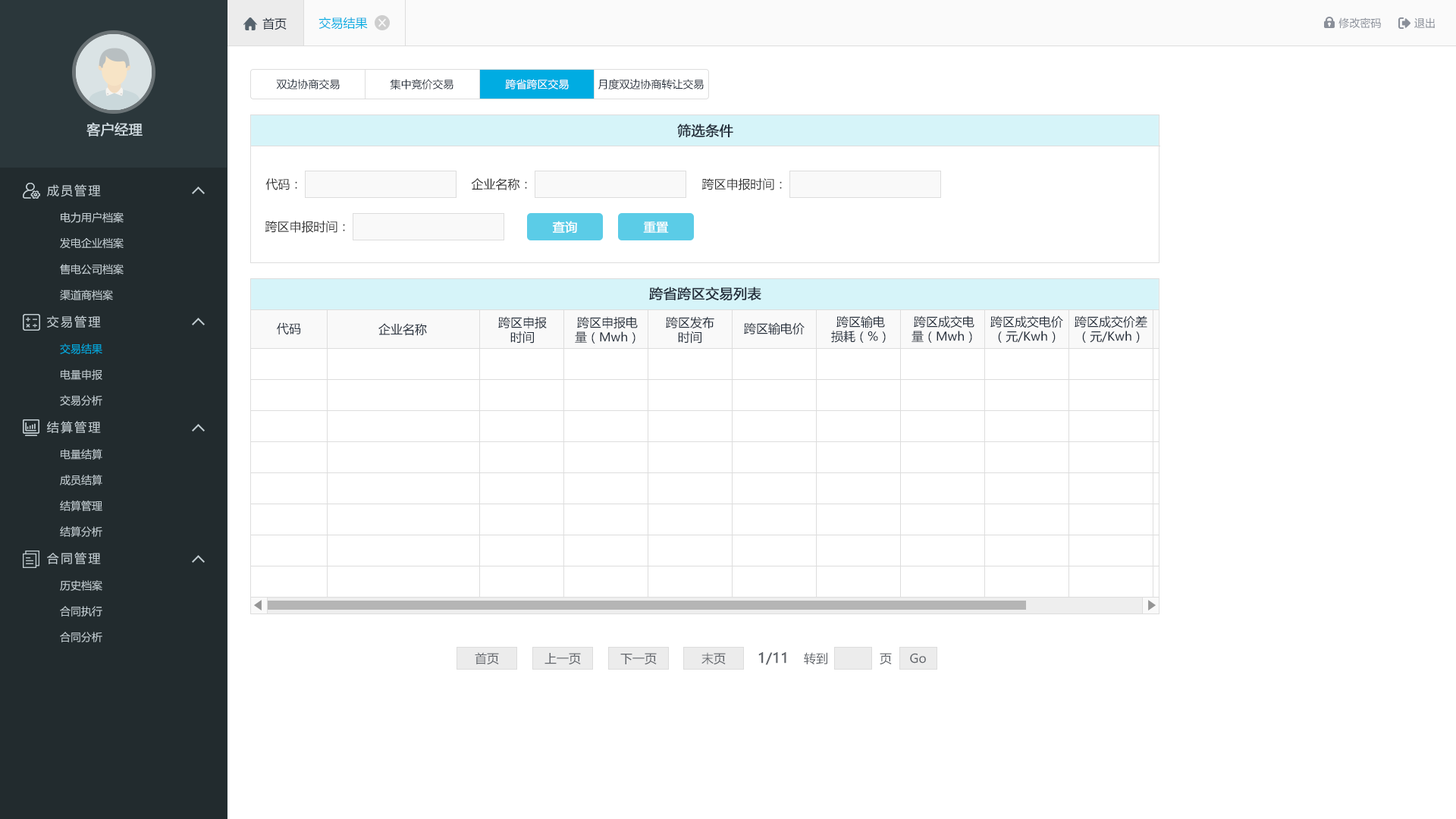
<style>
.page{position:relative;width:1456px;height:819px;background:#ffffff}
.page>*{position:absolute;margin:0}
.t1{font:12.1px "MicrosoftYaHei";color:#242e3b}
.t2{font:12.1px "MicrosoftYaHei";color:#00ace2}
.t3{font:10.6px "MicrosoftYaHei";color:#8a8f99}
.t4{font:10.6px "MicrosoftYaHei";color:#242e3b}
.t5{font:10.6px "MicrosoftYaHei";color:#ffffff}
.t6{font:13.6px "MicrosoftYaHei";color:#d1dce2;font-weight:bold}
.t7{font:13.6px "MicrosoftYaHei";color:#242e3b;font-weight:bold}
.t8{font:12.1px "MicrosoftYaHei";letter-spacing:0.14em;color:#c2cdd2}
.t9{font:12.1px "MicrosoftYaHei";color:#333333}
.t10{font:10.6px "MicrosoftYaHei";color:#c2cdd2}
.t11{font:12.1px "MicrosoftYaHei";color:#ffffff;font-weight:bold}
.t12{font:10.6px "MicrosoftYaHei";color:#00ace2}
.t13{font:12.1px "MicrosoftYaHei";color:#61656b}
.t14{font:13.6px "MicrosoftYaHei";color:#61656b;font-weight:bold}
</style>
<div class="page">
<p class="t1" style="left:262px;top:17px;width:25px;height:13px">首页</p>
<p class="t2" style="left:318px;top:17px;width:50px;height:13px">交易结果</p>
<p class="t3" style="left:1338px;top:17px;width:43px;height:12px">修改密码</p>
<p class="t3" style="left:1414px;top:17px;width:21px;height:11px">退出</p>
<p class="t4" style="left:276px;top:79px;width:64px;height:10px">双边协商交易</p>
<p class="t4" style="left:390px;top:79px;width:63px;height:10px">集中竞价交易</p>
<p class="t5" style="left:505px;top:79px;width:64px;height:10px">跨省跨区交易</p>
<p class="t4" style="left:598px;top:79px;width:106px;height:10px">月度双边协商转让交易</p>
<p class="t6" style="left:86px;top:122px;width:57px;height:14px">客户经理</p>
<p class="t7" style="left:677px;top:124px;width:56px;height:14px">筛选条件</p>
<p class="t8" style="left:47px;top:184px;width:54px;height:13px">成员管理</p>
<p class="t9" style="left:265px;top:178px;width:32px;height:12px">代码：</p>
<p class="t9" style="left:471px;top:178px;width:56px;height:12px">企业名称：</p>
<p class="t9" style="left:701px;top:178px;width:81px;height:12px">跨区申报时间：</p>
<p class="t10" style="left:61px;top:212px;width:63px;height:11px">电力用户档案</p>
<p class="t9" style="left:265px;top:221px;width:80px;height:12px">跨区申报时间：</p>
<p class="t11" style="left:552px;top:221px;width:25px;height:12px">查询</p>
<p class="t11" style="left:643px;top:221px;width:26px;height:12px">重置</p>
<p class="t10" style="left:60px;top:237px;width:64px;height:12px">发电企业档案</p>
<p class="t10" style="left:60px;top:264px;width:64px;height:11px">售电公司档案</p>
<p class="t10" style="left:60px;top:290px;width:53px;height:10px">渠道商档案</p>
<p class="t7" style="left:649px;top:287px;width:112px;height:14px">跨省跨区交易列表</p>
<p class="t8" style="left:47px;top:315px;width:54px;height:13px">交易管理</p>
<p class="t1" style="left:498px;top:316px;width:49px;height:28px;text-align:center">跨区申报<br>时间</p>
<p class="t1" style="left:575px;top:316px;width:63px;height:28px;text-align:center">跨区申报电<br>量（Mwh）</p>
<p class="t1" style="left:666px;top:316px;width:48px;height:28px;text-align:center">跨区发布<br>时间</p>
<p class="t1" style="left:831px;top:315px;width:55px;height:28px;text-align:center">跨区输电<br>损耗（%）</p>
<p class="t1" style="left:912px;top:315px;width:62px;height:28px;text-align:center">跨区成交电<br>量（Mwh）</p>
<p class="t1" style="left:990px;top:315px;width:73px;height:28px;text-align:center">跨区成交电价<br>（元/Kwh）</p>
<p class="t1" style="left:1075px;top:315px;width:72px;height:28px;text-align:center">跨区成交价差<br>（元/Kwh）</p>
<p class="t1" style="left:277px;top:322px;width:24px;height:12px">代码</p>
<p class="t1" style="left:378px;top:323px;width:49px;height:13px">企业名称</p>
<p class="t1" style="left:744px;top:322px;width:61px;height:13px">跨区输电价</p>
<p class="t12" style="left:60px;top:344px;width:42px;height:10px">交易结果</p>
<p class="t10" style="left:61px;top:369px;width:41px;height:11px">电量申报</p>
<p class="t10" style="left:60px;top:395px;width:42px;height:11px">交易分析</p>
<p class="t8" style="left:47px;top:421px;width:54px;height:13px">结算管理</p>
<p class="t10" style="left:61px;top:449px;width:41px;height:11px">电量结算</p>
<p class="t10" style="left:60px;top:475px;width:42px;height:10px">成员结算</p>
<p class="t10" style="left:60px;top:500px;width:42px;height:11px">结算管理</p>
<p class="t10" style="left:60px;top:526px;width:42px;height:11px">结算分析</p>
<p class="t8" style="left:47px;top:552px;width:54px;height:12px">合同管理</p>
<p class="t10" style="left:60px;top:580px;width:42px;height:11px">历史档案</p>
<p class="t10" style="left:60px;top:606px;width:42px;height:11px">合同执行</p>
<p class="t10" style="left:60px;top:632px;width:42px;height:10px">合同分析</p>
<p class="t13" style="left:475px;top:652px;width:24px;height:13px">首页</p>
<p class="t13" style="left:544px;top:653px;width:37px;height:12px">上一页</p>
<p class="t13" style="left:620px;top:653px;width:37px;height:12px">下一页</p>
<p class="t13" style="left:701px;top:652px;width:25px;height:13px">末页</p>
<p class="t14" style="left:758px;top:652px;width:28px;height:13px">1/11</p>
<p class="t13" style="left:804px;top:652px;width:23px;height:12px">转到</p>
<p class="t13" style="left:880px;top:653px;width:12px;height:12px">页</p>
<p class="t13" style="left:910px;top:653px;width:16px;height:11px">Go</p>
</div>
